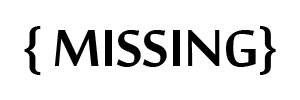
<style>
.page{position:relative;width:300px;height:100px;background:#ffffff}
.page>*{position:absolute;margin:0}
.t1{font:80px "MoolBoran";color:#000000}
</style>
<div class="page">
<p class="t1" style="left:24px;top:26px;width:252px;height:49px">{ MISSING}</p>
</div>
